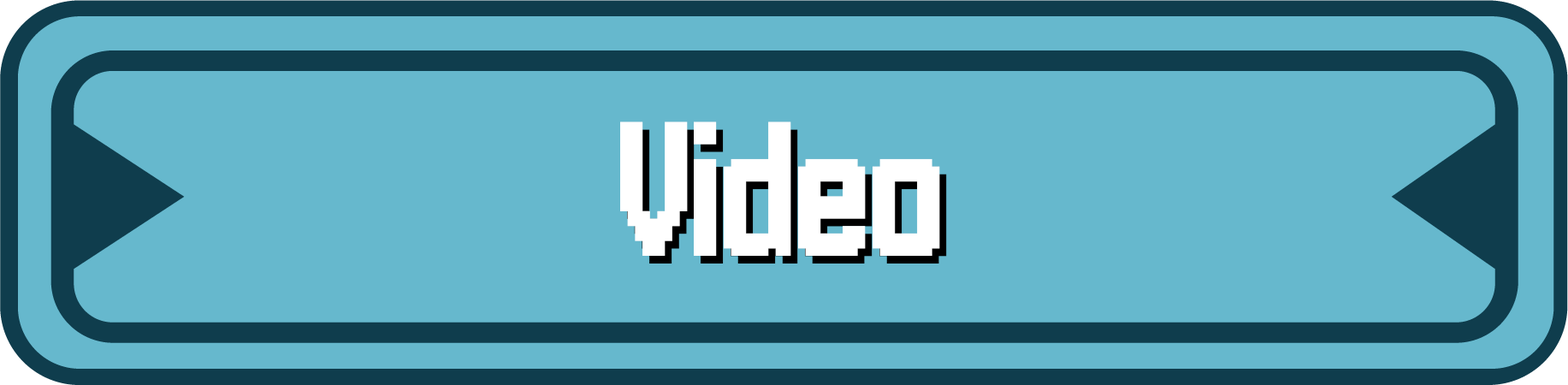
<style>
.page{position:relative;width:1568px;height:385px;background:#66b8cd}
.page>*{position:absolute;margin:0}
.t1{font:171.1px "Hannover-Messe-Sans";color:#ffffff}
</style>
<div class="page">
<p class="t1" style="left:620px;top:121px;width:320px;height:135px">Video</p>
</div>
